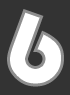
<style>
.page{position:relative;width:70px;height:95px;background:#333333}
.page>*{position:absolute;margin:0}
.t1{font:110px "Bauhaus93";letter-spacing:0.2em;color:#ffffff}
</style>
<div class="page">
<p class="t1" style="left:7px;top:9px;width:57px;height:78px">6</p>
</div>
